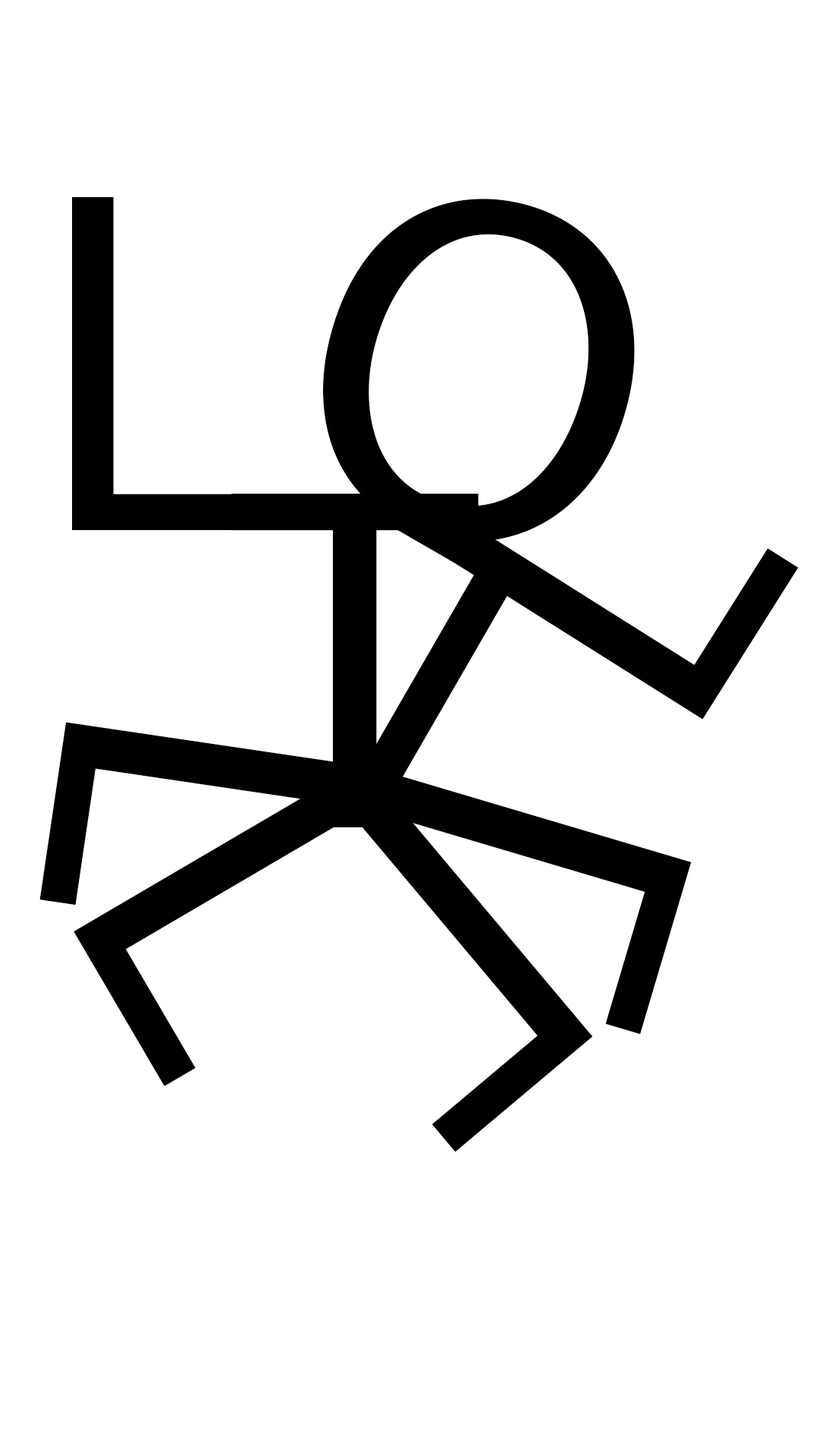
<style>
.page{position:relative;width:819px;height:1456px;background:#ffffff}
.page>*{position:absolute;margin:0}
.t1{font:493.5px "MyriadPro-Regular";color:#000000;scale:0.97 1}
.t2{font:494.5px "MyriadPro-Regular";color:#000000}
.t3{font:446.1px "MyriadPro-Regular";color:#000000}
</style>
<div class="page">
<p class="t1" style="left:72px;top:197px;width:180px;height:333px">L</p>
<p class="t2" style="left:323px;top:199px;width:312px;height:342px;rotate:-165deg">O</p>
<p class="t2" style="left:231px;top:494px;width:248px;height:333px">T</p>
<p class="t3" style="left:340px;top:500px;width:264px;height:326px;rotate:30deg">T</p>
<p class="t1" style="left:421px;top:507px;width:378px;height:213px;rotate:-58deg">L</p>
<p class="t1" style="left:39px;top:722px;width:356px;height:183px;rotate:98deg">L</p>
<p class="t1" style="left:74px;top:763px;width:308px;height:324px;rotate:60deg">L</p>
<p class="t1" style="left:360px;top:767px;width:332px;height:267px;rotate:107deg">L</p>
<p class="t1" style="left:347px;top:782px;width:246px;height:370px;rotate:140deg">L</p>
</div>
